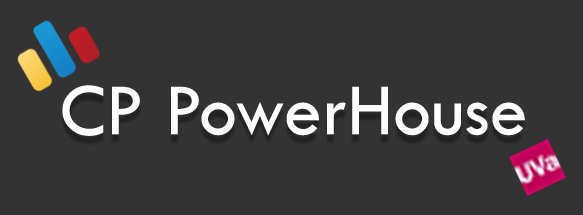
<style>
.page{position:relative;width:583px;height:215px;background:#333333}
.page>*{position:absolute;margin:0}
.t1{font:76px "TwCenMT-Regular";color:#ffffff}
</style>
<div class="page">
<p class="t1" style="left:62px;top:85px;width:463px;height:51px">CP PowerHouse</p>
</div>
